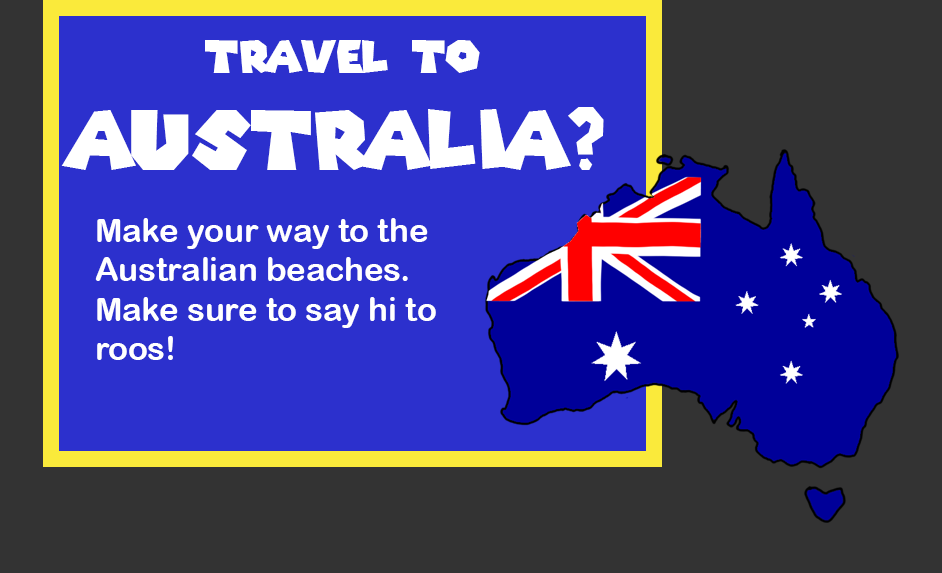
<style>
.page{position:relative;width:942px;height:573px;background:#333333}
.page>*{position:absolute;margin:0}
.t1{font:81.1px "SuperMarioGalaxy";color:#ffffff}
.t2{font:43.6px "SuperMarioGalaxy";color:#ffffff}
.t3{font:32.8px "ArialRoundedMTBold";color:#ffffff}
</style>
<div class="page">
<p class="t1" style="left:61px;top:40px;width:543px;height:130px;text-align:center"><span class="t2">Travel to <br></span>Australia?</p>
<p class="t3" style="left:95px;top:218px;width:341px;height:142px">Make your way to the <br>Australian beaches.<br>Make sure to say hi to<br>roos!</p>
</div>
